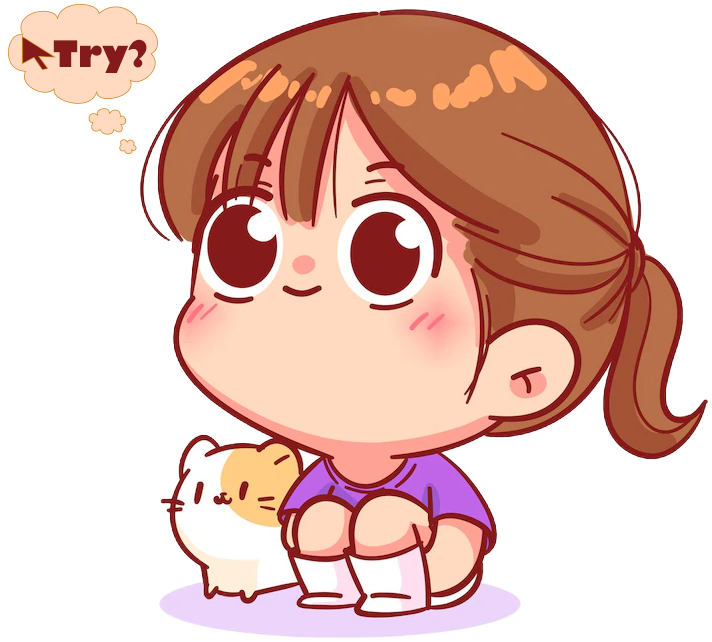
<style>
.page{position:relative;width:712px;height:642px;background:#ffffff}
.page>*{position:absolute;margin:0}
.t1{font:36.1px "GillSans-UltraBold";color:#851a1a}
</style>
<div class="page">
<p class="t1" style="left:53px;top:39px;width:94px;height:34px">Try?</p>
</div>
